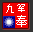
<style>
.page{position:relative;width:33px;height:32px;background:#f20000}
.page>*{position:absolute;margin:0}
.t1{font:10.4px "SimSun";color:#ffffff}
.t2{font:11.7px "SimSun";color:#ffffff}
</style>
<div class="page">
<p class="t1" style="left:6px;top:4px;width:19px;height:9px">九军</p>
<p class="t2" style="left:16px;top:15px;width:11px;height:12px">奉</p>
</div>
